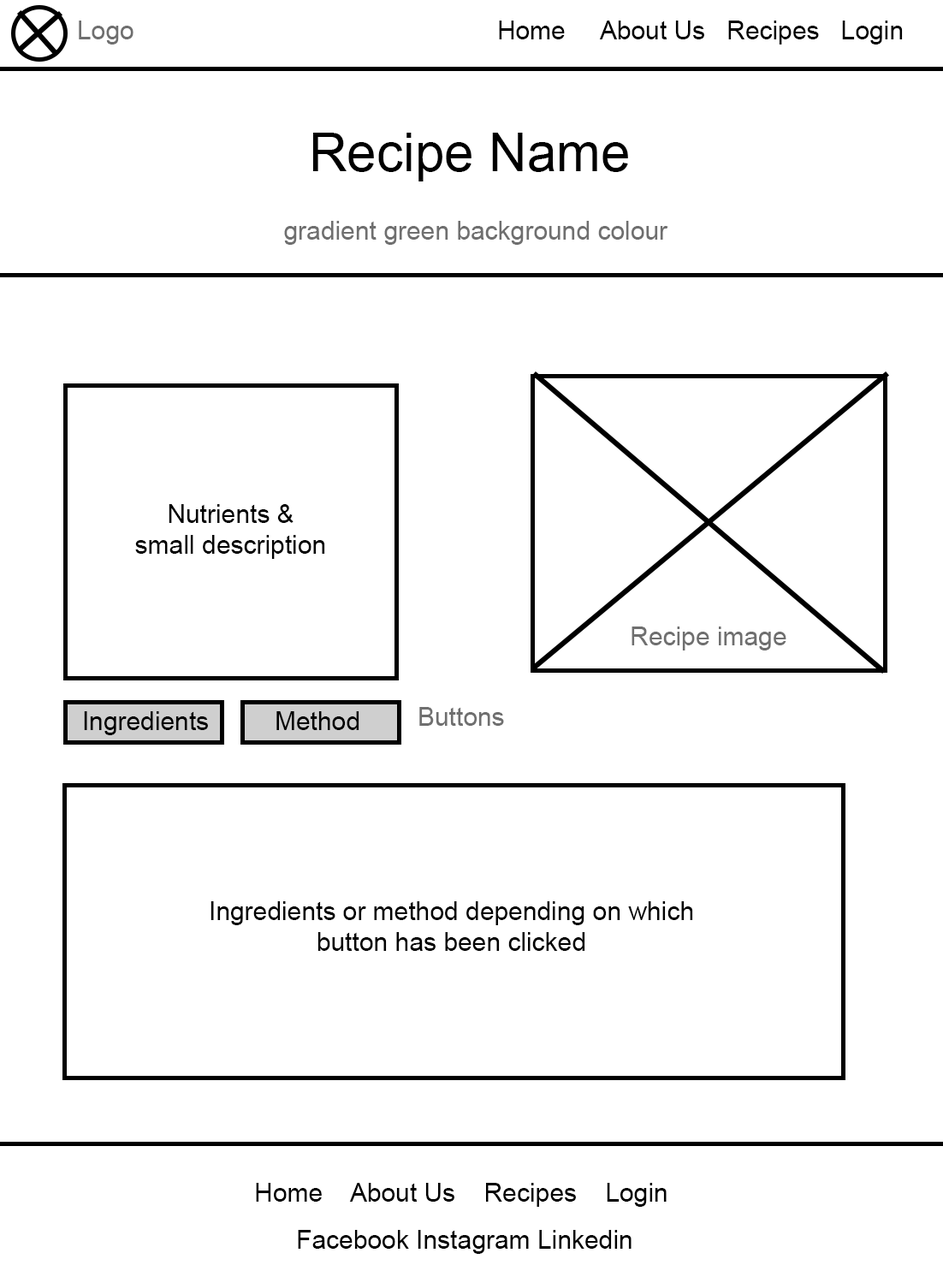
<style>
.page{position:relative;width:943px;height:1265px;background:#ffffff}
.page>*{position:absolute;margin:0}
.t1{font:25.7px "ArialMT";color:#6f6f6f}
.t2{font:25.7px "ArialMT";color:#000000}
.t3{font:53px "ArialMT";color:#000000}
</style>
<div class="page">
<p class="t1" style="left:79px;top:21px;width:54px;height:23px">Logo</p>
<p class="t2" style="left:499px;top:21px;width:404px;height:23px">Home     About Us   Recipes   Login</p>
<p class="t3" style="left:312px;top:133px;width:316px;height:48px">Recipe Name</p>
<p class="t1" style="left:284px;top:221px;width:384px;height:24px">gradient green background colour</p>
<p class="t2" style="left:135px;top:504px;width:190px;height:55px;text-align:center">Nutrients &amp;<br>small description</p>
<p class="t1" style="left:631px;top:626px;width:155px;height:24px">Recipe image</p>
<p class="t2" style="left:84px;top:711px;width:124px;height:24px">Ingredients</p>
<p class="t2" style="left:276px;top:711px;width:83px;height:19px">Method</p>
<p class="t1" style="left:419px;top:707px;width:85px;height:19px">Buttons</p>
<p class="t2" style="left:210px;top:901px;width:483px;height:50px;text-align:center">Ingredients or method depending on which button has been clicked</p>
<p class="t2" style="left:256px;top:1182px;width:411px;height:24px">Home    About Us    Recipes    Login</p>
<p class="t2" style="left:298px;top:1230px;width:333px;height:24px">Facebook Instagram Linkedin</p>
</div>
